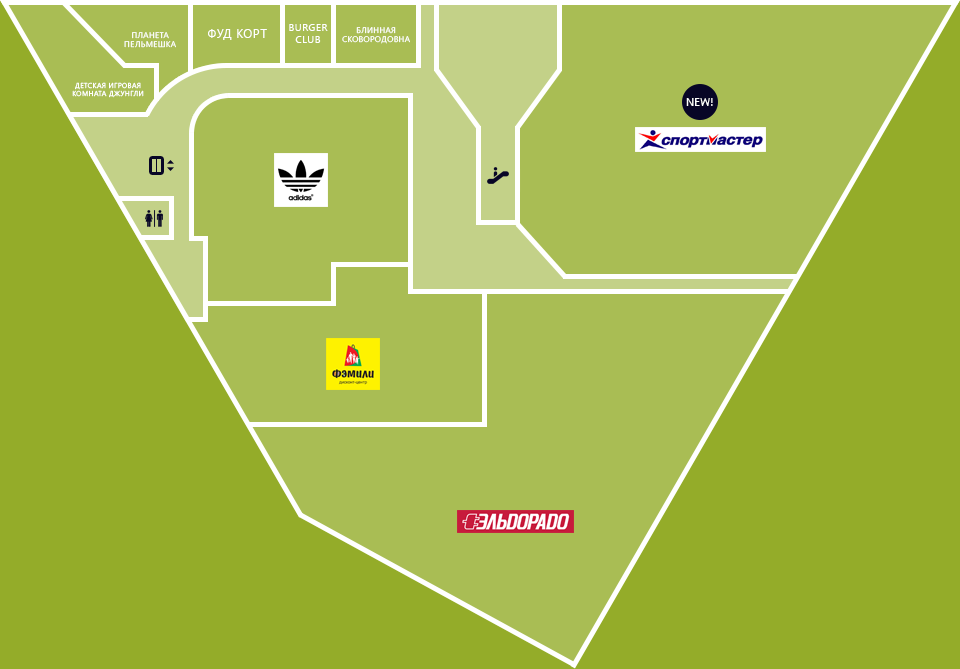
<style>
.page{position:relative;width:960px;height:669px;background:#a9bd54}
.page>*{position:absolute;margin:0}
.t1{font:12px "SegoeUI";letter-spacing:0.05em;color:#ffffff;text-transform:uppercase}
.t2{font:10px "SegoeUI";letter-spacing:0.05em;color:#ffffff;text-transform:uppercase}
.t3{font:8px "SegoeUI";letter-spacing:0.05em;color:#ffffff;text-transform:uppercase}
.t4{font:7px "SegoeUI";letter-spacing:0.05em;color:#ffffff;text-transform:uppercase}
.t5{font:11px "SegoeUI";color:#ffffff;text-transform:uppercase}
</style>
<div class="page">
<p class="t1" style="left:208px;top:29px;width:59px;height:11px">Фуд корт</p>
<p class="t2" style="left:289px;top:24px;width:39px;height:19px;text-align:center">Burger<br>Club</p>
<p class="t3" style="left:342px;top:27px;width:68px;height:17px;text-align:center">Блинная<br>сковородовна</p>
<p class="t3" style="left:124px;top:32px;width:52px;height:16px;text-align:center">Планета<br>пельмешка</p>
<p class="t4" style="left:72px;top:82px;width:72px;height:16px;text-align:center">Детская игровая<br>комната ДЖУНГЛИ</p>
<p class="t5" style="left:686px;top:98px;width:27px;height:8px">New!</p>
</div>
